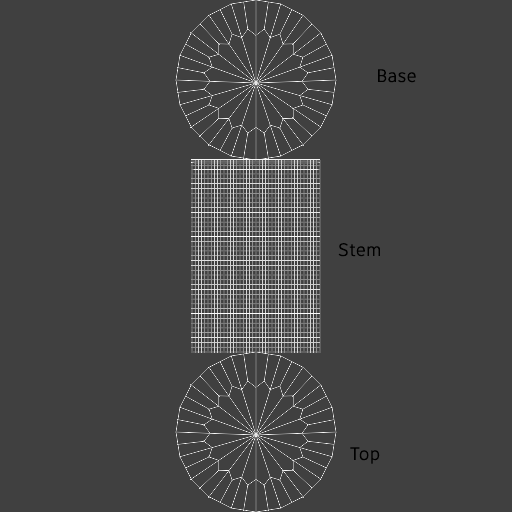
<style>
.page{position:relative;width:512px;height:512px;background:#404040}
.page>*{position:absolute;margin:0}
.t1{font:18px "ArtifaktElement-Regular";color:#000000}
</style>
<div class="page">
<p class="t1" style="left:378px;top:69px;width:38px;height:14px">Base</p>
<p class="t1" style="left:338px;top:243px;width:42px;height:14px">Stem</p>
<p class="t1" style="left:350px;top:447px;width:30px;height:17px">Top</p>
</div>
